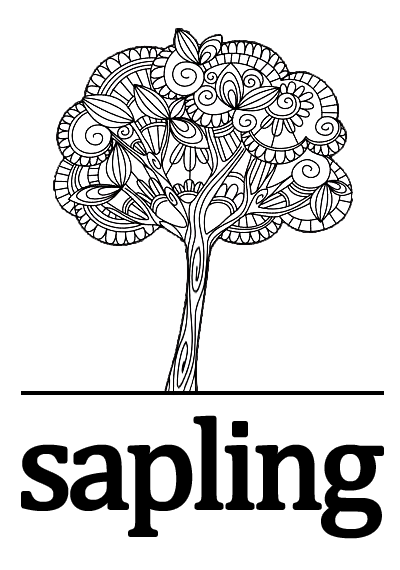
<style>
.page{position:relative;width:400px;height:570px;background:#ffffff}
.page>*{position:absolute;margin:0}
.t1{font:129px "Cambria";letter-spacing:-0.04em;color:#000000}
</style>
<div class="page">
<p class="t1" style="left:23px;top:417px;width:359px;height:120px">sapling</p>
</div>
